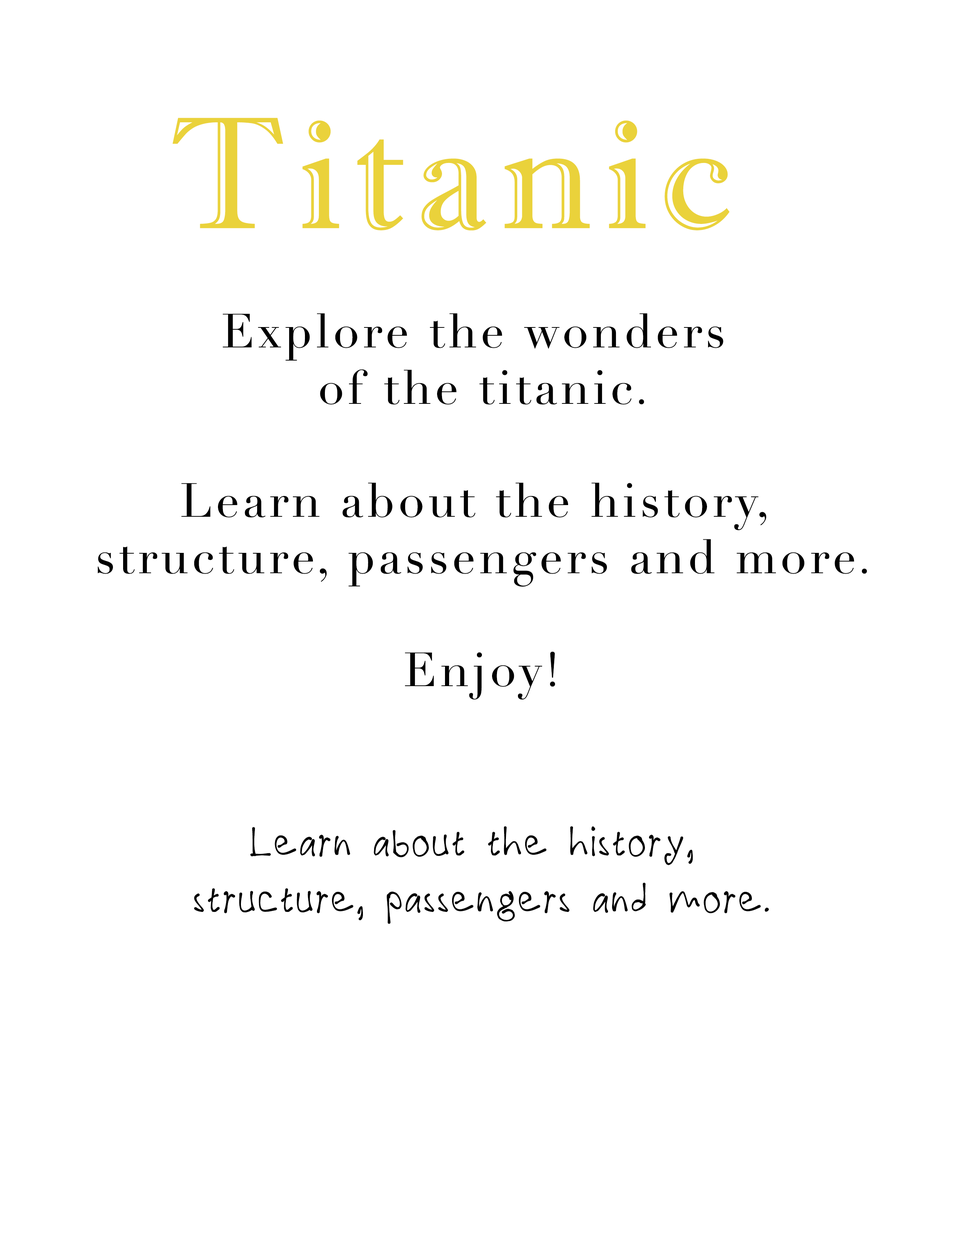
<style>
.page{position:relative;width:960px;height:1242px;background:#ffffff}
.page>*{position:absolute;margin:0}
.t1{font:160px "ImprintMT-Shadow";letter-spacing:0.075em;color:#ead23b}
.t2{font:47.1px "Didot";letter-spacing:0.075em;color:#000000}
.t3{font:47.1px "!PaulMaul";letter-spacing:0.075em;color:#000000}
</style>
<div class="page">
<p class="t1" style="left:172px;top:118px;width:558px;height:113px">Titanic</p>
<p class="t2" style="left:97px;top:313px;width:770px;height:611px;text-align:center">Explore the wonders <br>of the titanic.<br><br>Learn about the history, <br>structure, passengers and more.<br><br>Enjoy!<br><br><br><span class="t3">Learn about the history, <br>structure, passengers and more.</span></p>
</div>
